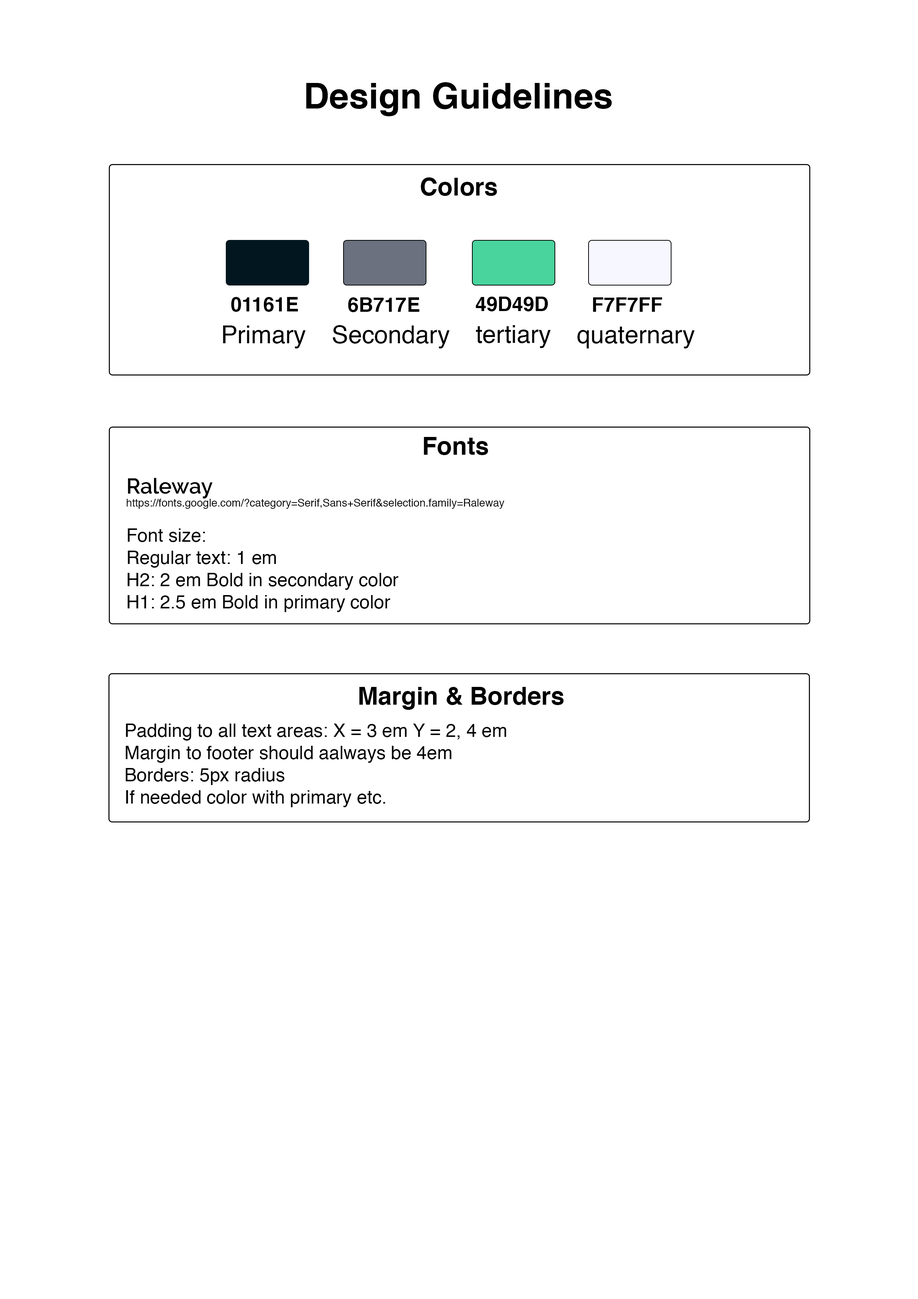
<style>
.page{position:relative;width:918px;height:1299px;background:#ffffff}
.page>*{position:absolute;margin:0}
.t1{font:35.5px "Helvetica-Bold";color:#000000}
.t2{font:24.7px "Helvetica-Bold";color:#000000}
.t3{font:20.1px "Helvetica-Bold";color:#000000}
.t4{font:24.7px "Helvetica";color:#000000}
.t5{font:18.5px "Helvetica";color:#000000}
.t6{font:21.6px "Raleway-SemiBold";color:#000000}
.t7{font:10.8px "Helvetica";color:#000000}
</style>
<div class="page">
<p class="t1" style="left:306px;top:82px;width:306px;height:34px">Design Guidelines</p>
<p class="t2" style="left:421px;top:177px;width:76px;height:19px">Colors</p>
<p class="t3" style="left:231px;top:297px;width:67px;height:15px">01161E</p>
<p class="t3" style="left:348px;top:297px;width:71px;height:15px">6B717E</p>
<p class="t3" style="left:476px;top:297px;width:72px;height:14px">49D49D</p>
<p class="t3" style="left:593px;top:297px;width:69px;height:15px">F7F7FF</p>
<p class="t4" style="left:223px;top:325px;width:83px;height:23px">Primary</p>
<p class="t4" style="left:333px;top:325px;width:117px;height:23px">Secondary</p>
<p class="t4" style="left:476px;top:325px;width:75px;height:23px">tertiary</p>
<p class="t4" style="left:578px;top:327px;width:117px;height:21px">quaternary</p>
<p class="t2" style="left:424px;top:437px;width:64px;height:18px">Fonts</p>
<p class="t5" style="left:127px;top:478px;width:378px;height:134px"><span class="t6">Raleway<br></span><span class="t7">https://fonts.google.com/?category=Serif,Sans+Serif&amp;selection.family=Raleway<br><br></span>Font size: <br>Regular text: 1 em <br>H2: 2 em Bold in secondary color<br>H1: 2.5 em Bold in primary color</p>
<p class="t2" style="left:359px;top:687px;width:205px;height:23px">Margin &amp; Borders</p>
<p class="t5" style="left:126px;top:723px;width:380px;height:84px">Padding to all text areas: X = 3 em Y = 2, 4 em<br>Margin to footer should aalways be 4em<br>Borders: 5px radius<br>If needed color with primary etc.</p>
</div>
